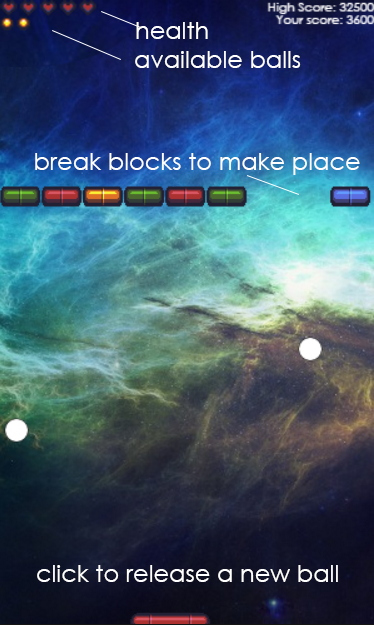
<style>
.page{position:relative;width:374px;height:625px}
.page>*{position:absolute;margin:0}
.t1{font:24px "CenturyGothic";color:#ffffff}
</style>
<div class="page">
<p class="t1" style="left:136px;top:22px;width:72px;height:17px">health</p>
<p class="t1" style="left:135px;top:51px;width:166px;height:17px">available balls</p>
<p class="t1" style="left:35px;top:153px;width:325px;height:22px">break blocks to make place</p>
<p class="t1" style="left:37px;top:565px;width:301px;height:17px">click to release a new ball</p>
</div>
